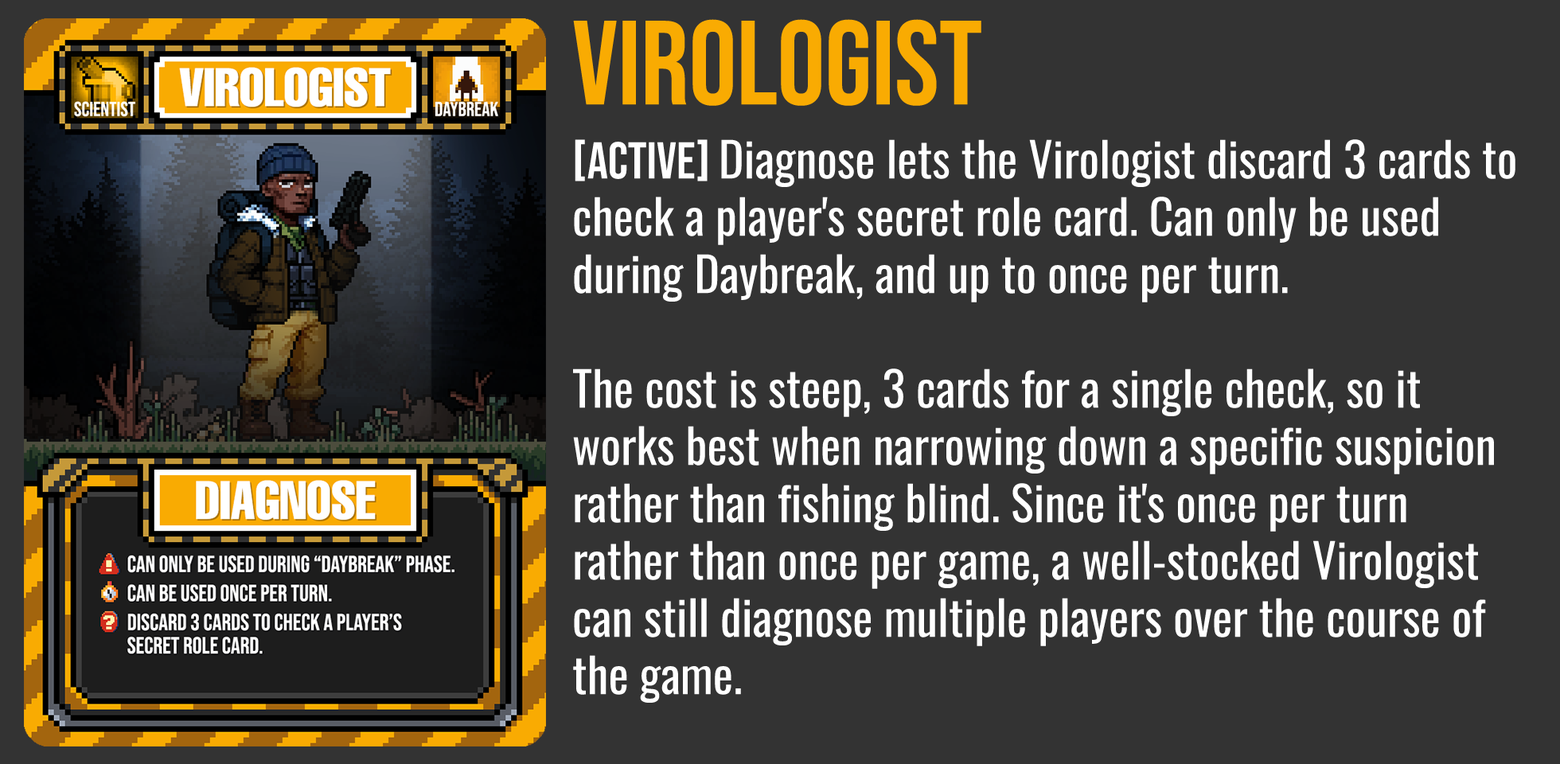
<style>
.page{position:relative;width:1560px;height:764px;background:#333333}
.page>*{position:absolute;margin:0}
.t1{font:119.4px "BebasNeue-Regular";color:#f9ab02}
.t2{font:47.8px "Oswald-Regular";color:#ffffff}
.t3{font:51.7px "BebasNeue-Regular";color:#ffffff}
</style>
<div class="page">
<p class="t1" style="left:573px;top:19px;width:409px;height:87px">VIROLOGIST</p>
<p class="t2" style="left:573px;top:139px;width:943px;height:564px"><span class="t3">[ACTIVE] </span>Diagnose lets the Virologist discard 3 cards to check a player's secret role card. Can only be used during Daybreak, and up to once per turn.<br><br>The cost is steep, 3 cards for a single check, so it works best when narrowing down a specific suspicion rather than fishing blind. Since it's once per turn rather than once per game, a well-stocked Virologist can still diagnose multiple players over the course of the game.</p>
</div>
